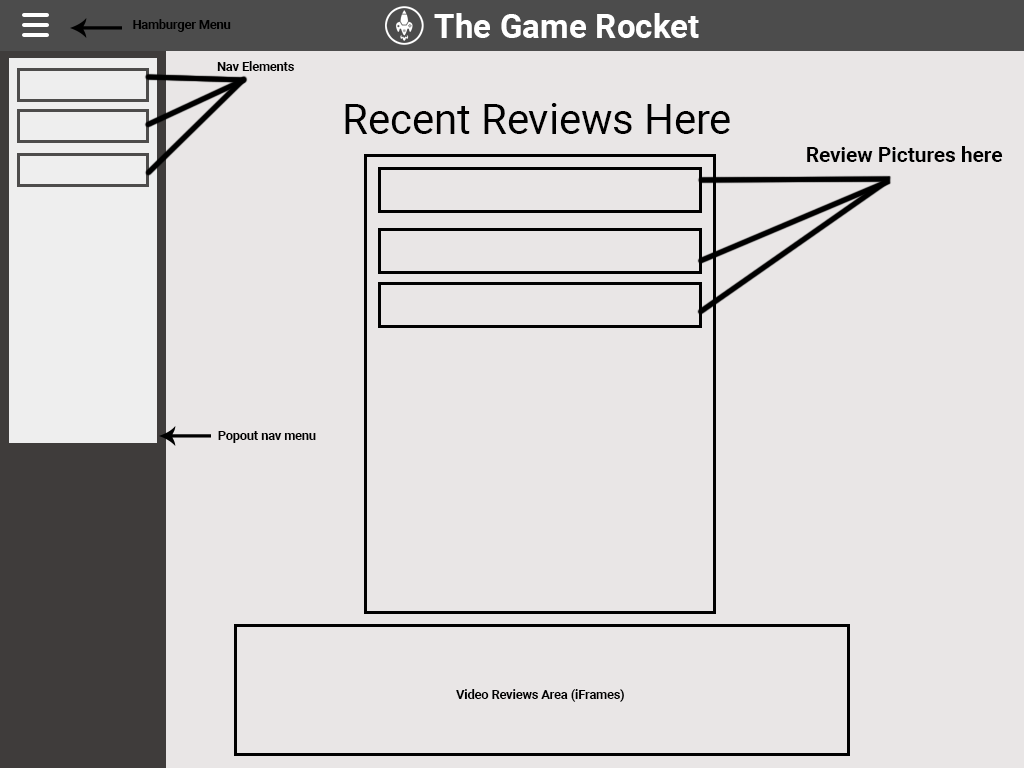
<style>
.page{position:relative;width:1024px;height:768px;background:#e9e6e6}
.page>*{position:absolute;margin:0}
.t1{font:33.3px "Roboto-Bold";color:#ffffff}
.t2{font:12.5px "Roboto-Bold";color:#000000}
.t3{font:41.7px "Roboto-Regular";color:#000000}
.t4{font:20.8px "Roboto-Bold";color:#000000}
</style>
<div class="page">
<p class="t1" style="left:434px;top:13px;width:265px;height:25px">The Game Rocket</p>
<p class="t2" style="left:133px;top:19px;width:98px;height:13px">Hamburger Menu</p>
<p class="t2" style="left:217px;top:61px;width:77px;height:10px">Nav Elements</p>
<p class="t3" style="left:345px;top:103px;width:385px;height:31px">Recent Reviews Here</p>
<p class="t4" style="left:807px;top:146px;width:196px;height:16px">Review Pictures here</p>
<p class="t2" style="left:218px;top:431px;width:98px;height:12px">Popout nav menu</p>
<p class="t2" style="left:456px;top:689px;width:168px;height:13px">Video Reviews Area (iFrames)</p>
</div>
